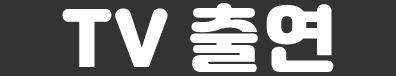
<style>
.page{position:relative;width:396px;height:76px;background:#333333}
.page>*{position:absolute;margin:0}
.t1{font:72px "Jalnan";letter-spacing:0.05em;color:#ffffff;text-transform:uppercase}
</style>
<div class="page">
<p class="t1" style="left:62px;top:3px;width:272px;height:69px">TV 출연</p>
</div>
